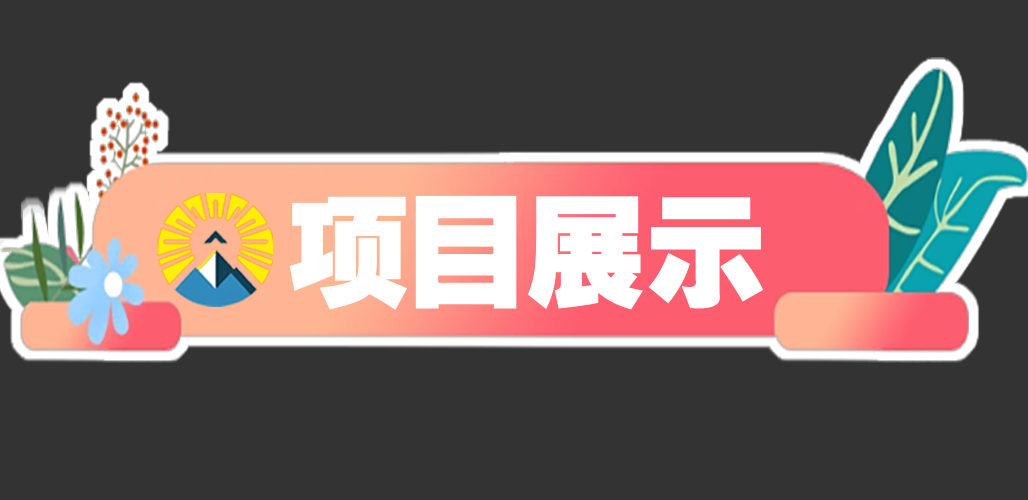
<style>
.page{position:relative;width:1028px;height:500px;background:#333333}
.page>*{position:absolute;margin:0}
.t1{font:119.4px "FZCCHJW--GB1-0";color:#ffffff}
</style>
<div class="page">
<p class="t1" style="left:289px;top:195px;width:475px;height:115px">项目展示</p>
</div>
